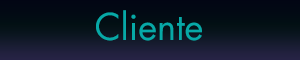
<style>
.page{position:relative;width:300px;height:60px}
.page>*{position:absolute;margin:0}
.t1{font:36px "Futura-Book";color:#07a9a7}
</style>
<div class="page">
<p class="t1" style="left:96px;top:10px;width:106px;height:31px">Cliente</p>
</div>
